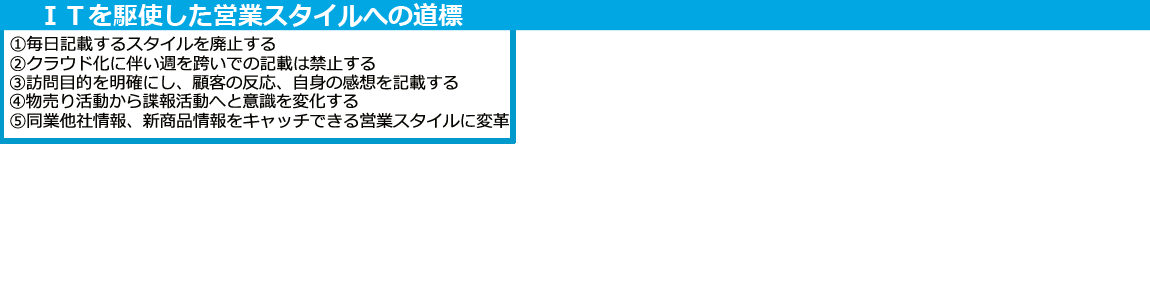
<style>
.page{position:relative;width:1150px;height:300px;background:#ffffff}
.page>*{position:absolute;margin:0}
.t1{font:25px "Meiryo-Bold";color:#ffffff}
.t2{font:16.7px "Meiryo";color:#060501}
</style>
<div class="page">
<p class="t1" style="left:45px;top:3px;width:418px;height:24px">ＩＴを駆使した営業スタイルへの道標</p>
<p class="t2" style="left:10px;top:35px;width:265px;height:17px">①毎日記載するスタイルを廃止する</p>
<p class="t2" style="left:10px;top:55px;width:365px;height:16px">②クラウド化に伴い週を跨いでの記載は禁止する</p>
<p class="t2" style="left:10px;top:74px;width:448px;height:17px">③訪問目的を明確にし、顧客の反応、自身の感想を記載する</p>
<p class="t2" style="left:10px;top:93px;width:348px;height:16px">④物売り活動から諜報活動へと意識を変化する</p>
<p class="t2" style="left:10px;top:112px;width:499px;height:17px">⑤同業他社情報、新商品情報をキャッチできる営業スタイルに変革</p>
</div>
